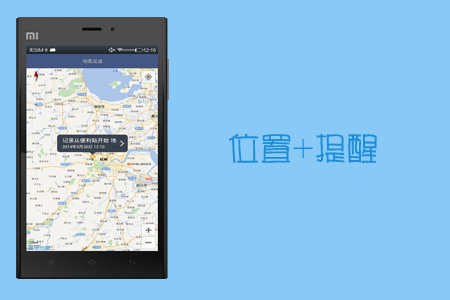
<style>
.page{position:relative;width:450px;height:300px;background:#88c9f5}
.page>*{position:absolute;margin:0}
.t1{font:32px "JManBuTi";color:#1e8ed9}
</style>
<div class="page">
<p class="t1" style="left:228px;top:133px;width:149px;height:30px">位置+提醒</p>
</div>
